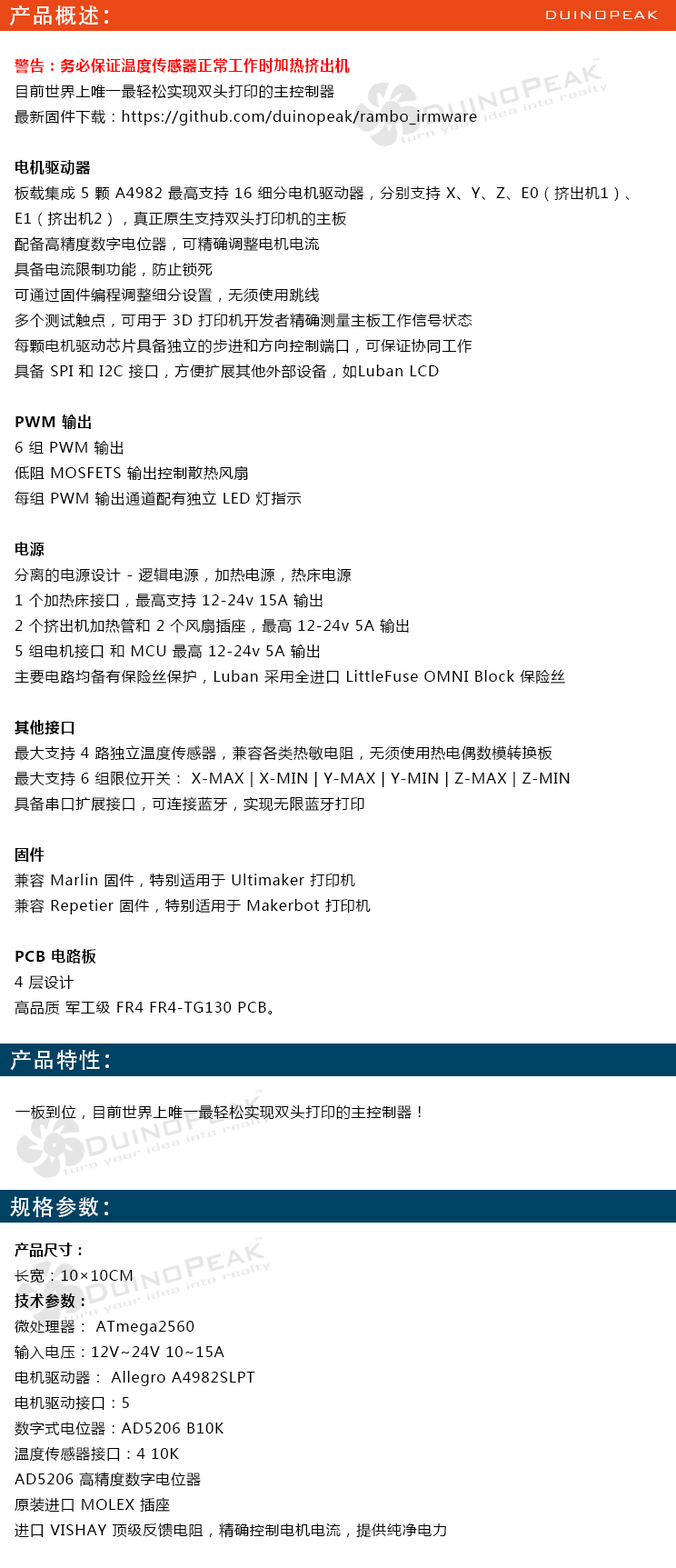
<style>
.page{position:relative;width:676px;height:1568px;background:#ffffff}
.page>*{position:absolute;margin:0}
.t1{font:21.8px "AdobeHeitiStd-Regular";letter-spacing:0.05em;color:#ffffff}
.t2{font:16.4px "BankGothicBT-Light";letter-spacing:0.05em;color:#ffffff}
.t3{font:14.5px "MicrosoftYaHei";letter-spacing:0.05em;color:#000000}
.t4{font:14.5px "MicrosoftYaHei-Bold";letter-spacing:0.05em;color:#ff0000}
.t5{font:14.5px "MicrosoftYaHei-Bold";letter-spacing:0.05em;color:#000000}
.t6{font:14.5px "MicrosoftYaHei-Bold";color:#000000}
</style>
<div class="page">
<p class="t1" style="left:9px;top:5px;width:99px;height:21px">产品概述：</p>
<p class="t2" style="left:546px;top:11px;width:113px;height:8px">DUINOPEAK</p>
<p class="t3" style="left:15px;top:58px;width:615px;height:957px"><span class="t4">警告：务必保证温度传感器正常工作时加热挤出机<br></span>目前世界上唯一最轻松实现双头打印的主控制器<br>最新固件下载：https://github.com/duinopeak/rambo_irmware<br><br><span class="t5">电机驱动器<br></span>板载集成 5 颗 A4982 最高支持 16 细分电机驱动器，分别支持 X、Y、Z、E0（挤出机1）、<br>E1（挤出机2），真正原生支持双头打印机的主板<br>配备高精度数字电位器，可精确调整电机电流<br>具备电流限制功能，防止锁死<br>可通过固件编程调整细分设置，无须使用跳线<br>多个测试触点，可用于 3D 打印机开发者精确测量主板工作信号状态<br>每颗电机驱动芯片具备独立的步进和方向控制端口，可保证协同工作<br>具备 SPI 和 I2C 接口，方便扩展其他外部设备，如Luban LCD<br> <br><span class="t5">PWM 输出<br></span>6 组 PWM 输出<br>低阻 MOSFETS 输出控制散热风扇<br>每组 PWM 输出通道配有独立 LED 灯指示<br> <br><span class="t5">电源<br></span>分离的电源设计 - 逻辑电源，加热电源，热床电源<br>1 个加热床接口，最高支持 12-24v 15A 输出<br>2 个挤出机加热管和 2 个风扇插座，最高 12-24v 5A 输出<br>5 组电机接口 和 MCU 最高 12-24v 5A 输出<br>主要电路均备有保险丝保护，Luban 采用全进口 LittleFuse OMNI Block 保险丝<br> <br><span class="t5">其他接口<br></span>最大支持 4 路独立温度传感器，兼容各类热敏电阻，无须使用热电偶数模转换板<br>最大支持 6 组限位开关： X-MAX | X-MIN | Y-MAX | Y-MIN | Z-MAX | Z-MIN<br>具备串口扩展接口，可连接蓝牙，实现无限蓝牙打印<br> <br><span class="t5">固件<br></span>兼容 Marlin 固件，特别适用于 Ultimaker 打印机<br>兼容 Repetier 固件，特别适用于 Makerbot 打印机<br> <br><span class="t5">PCB 电路板<br></span>4 层设计<br>高品质 军工级 FR4 FR4-TG130 PCB。</p>
<p class="t1" style="left:10px;top:1049px;width:99px;height:22px">产品特性：</p>
<p class="t3" style="left:15px;top:1104px;width:406px;height:16px">一板到位，目前世界上唯一最轻松实现双头打印的主控制器！</p>
<p class="t1" style="left:10px;top:1196px;width:98px;height:21px">规格参数：</p>
<p class="t3" style="left:15px;top:1243px;width:431px;height:295px"><span class="t6">产品尺寸：<br></span>长宽：10×10CM<br><span class="t5">技术参数：<br></span>微处理器： ATmega2560<br>输入电压：12V~24V 10~15A<br>电机驱动器： Allegro A4982SLPT<br>电机驱动接口：5<br>数字式电位器：AD5206 B10K<br>温度传感器接口：4 10K<br>AD5206 高精度数字电位器<br>原装进口 MOLEX 插座<br>进口 VISHAY 顶级反馈电阻，精确控制电机电流，提供纯净电力</p>
</div>
